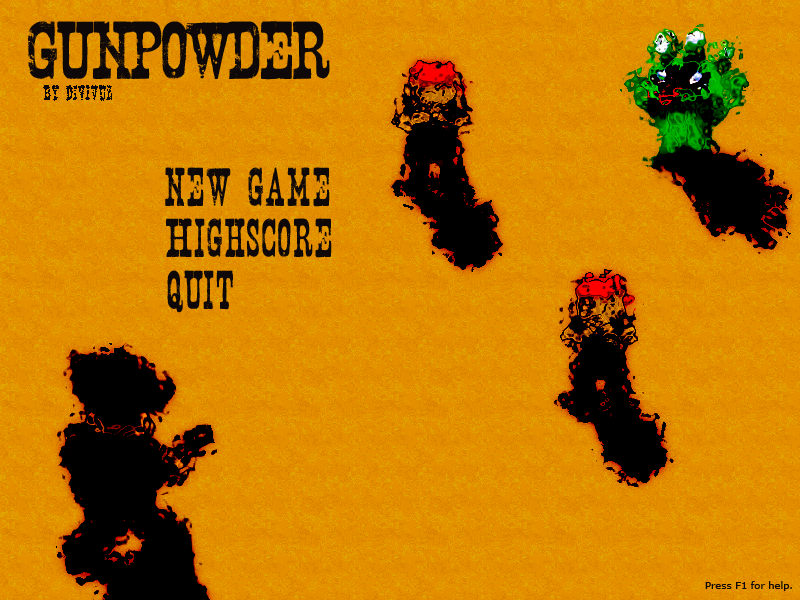
<style>
.page{position:relative;width:800px;height:600px;background:#e38f00}
.page>*{position:absolute;margin:0}
.t1{font:72px "Nashville";color:#0e0808}
.t2{font:18px "Nashville";color:#0e0808}
.t3{font:48px "Nashville";color:#0e0808}
.t4{font:10px "Verdana";color:#0e0808}
</style>
<div class="page">
<p class="t1" style="left:28px;top:21px;width:302px;height:59px">GUNPOWDER</p>
<p class="t2" style="left:43px;top:85px;width:70px;height:16px">by divivuz</p>
<p class="t3" style="left:165px;top:167px;width:165px;height:40px">new game</p>
<p class="t3" style="left:166px;top:218px;width:166px;height:40px">Highscore</p>
<p class="t3" style="left:167px;top:270px;width:66px;height:43px">quit</p>
<p class="t4" style="left:705px;top:581px;width:87px;height:10px">Press F1 for help.</p>
</div>
